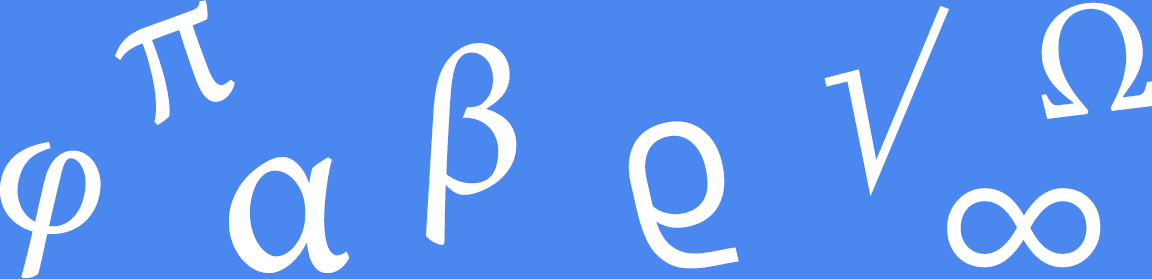
<style>
.page{position:relative;width:1152px;height:279px;background:#4a87ee}
.page>*{position:absolute;margin:0}
.t1{font:210px "MinionPro-Regular";color:#ffffff}
.t2{font:165px "MinionPro-Regular";color:#ffffff}
.t3{font:202.5px "SegoeUI";color:#ffffff}
.t4{font:192.5px "MinionPro-Regular";color:#ffffff}
.t5{font:250px "MinionPro-Regular";color:#ffffff}
.t6{font:207px "SegoeUI";color:#ffffff}
</style>
<div class="page">
<p class="t1" style="left:115px;top:0px;width:120px;height:125px;rotate:-21deg">π</p>
<p class="t1" style="left:824px;top:6px;width:125px;height:190px;rotate:13deg">√</p>
<p class="t2" style="left:1041px;top:2px;width:111px;height:117px;rotate:-7deg">Ω</p>
<p class="t1" style="left:426px;top:43px;width:91px;height:202px;rotate:3deg">β</p>
<p class="t3" style="left:628px;top:121px;width:111px;height:148px;rotate:-13deg">ϱ</p>
<p class="t4" style="left:0px;top:142px;width:101px;height:137px;rotate:13deg">φ</p>
<p class="t5" style="left:229px;top:157px;width:121px;height:116px">α</p>
<p class="t6" style="left:947px;top:188px;width:154px;height:80px">∞</p>
</div>
